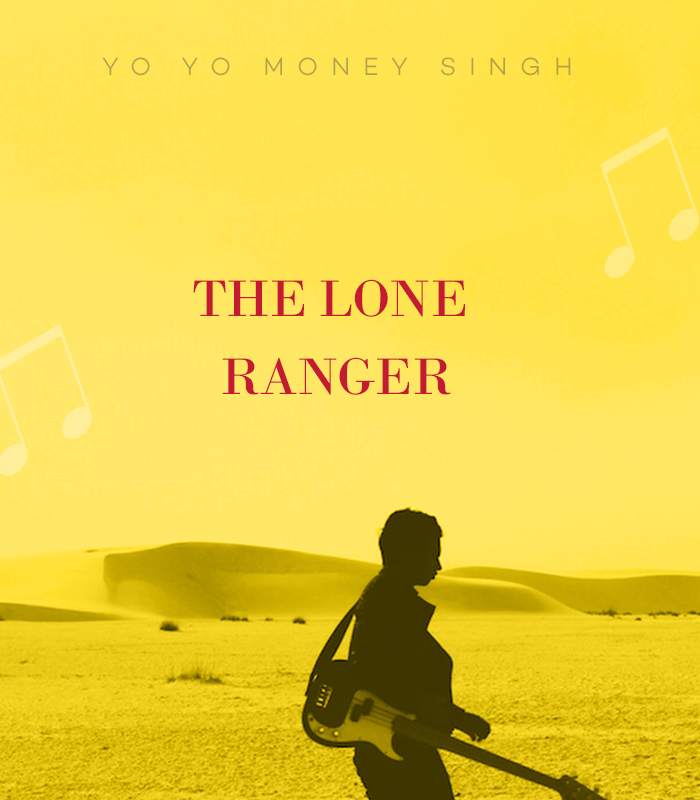
<style>
.page{position:relative;width:700px;height:800px}
.page>*{position:absolute;margin:0}
.t1{font:25.2px "Campton-LightDEMO";letter-spacing:0.5em;color:#b3a24b;text-transform:uppercase}
.t2{font:54.4px/78px "BodoniMT";letter-spacing:-0.02em;color:#c41b33;text-transform:uppercase}
</style>
<div class="page">
<p class="t1" style="left:102px;top:57px;width:469px;height:19px">yo yo money singh</p>
<p class="t2" style="left:193px;top:279px;width:272px;height:116px;text-align:center">The Lone <br>Ranger</p>
</div>
